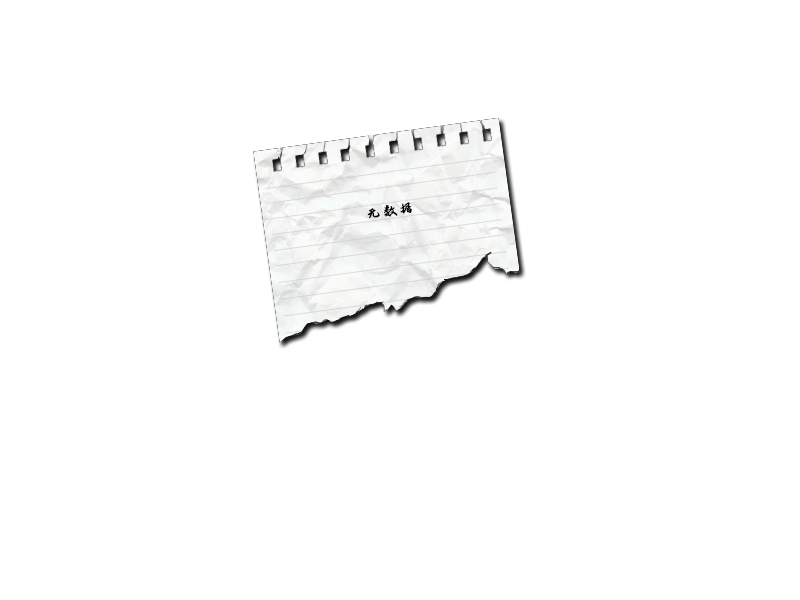
<style>
.page{position:relative;width:800px;height:600px;background:#ffffff}
.page>*{position:absolute;margin:0}
.t1{font:18.8px "slideyouran-Regular";color:#000000}
</style>
<div class="page">
<p class="t1" style="left:367px;top:202px;width:45px;height:17px;rotate:-8deg">无数据</p>
</div>
